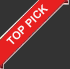
<style>
.page{position:relative;width:70px;height:69px;background:#333333}
.page>*{position:absolute;margin:0}
.t1{font:11px "Arial-BoldMT";color:#f8f3f3}
</style>
<div class="page">
<p class="t1" style="left:6px;top:4px;width:43px;height:41px;rotate:-45deg">TOP PICK</p>
</div>
